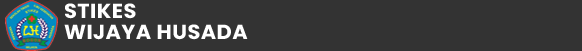
<style>
.page{position:relative;width:582px;height:51px;background:#333333}
.page>*{position:absolute;margin:0}
.t1{font:20.5px/20.2px "Poppins-Bold";letter-spacing:0.02em;color:#ffffff;text-transform:uppercase}
</style>
<div class="page">
<p class="t1" style="left:64px;top:3px;width:184px;height:37px">Stikes <br>wijaya husada</p>
</div>
